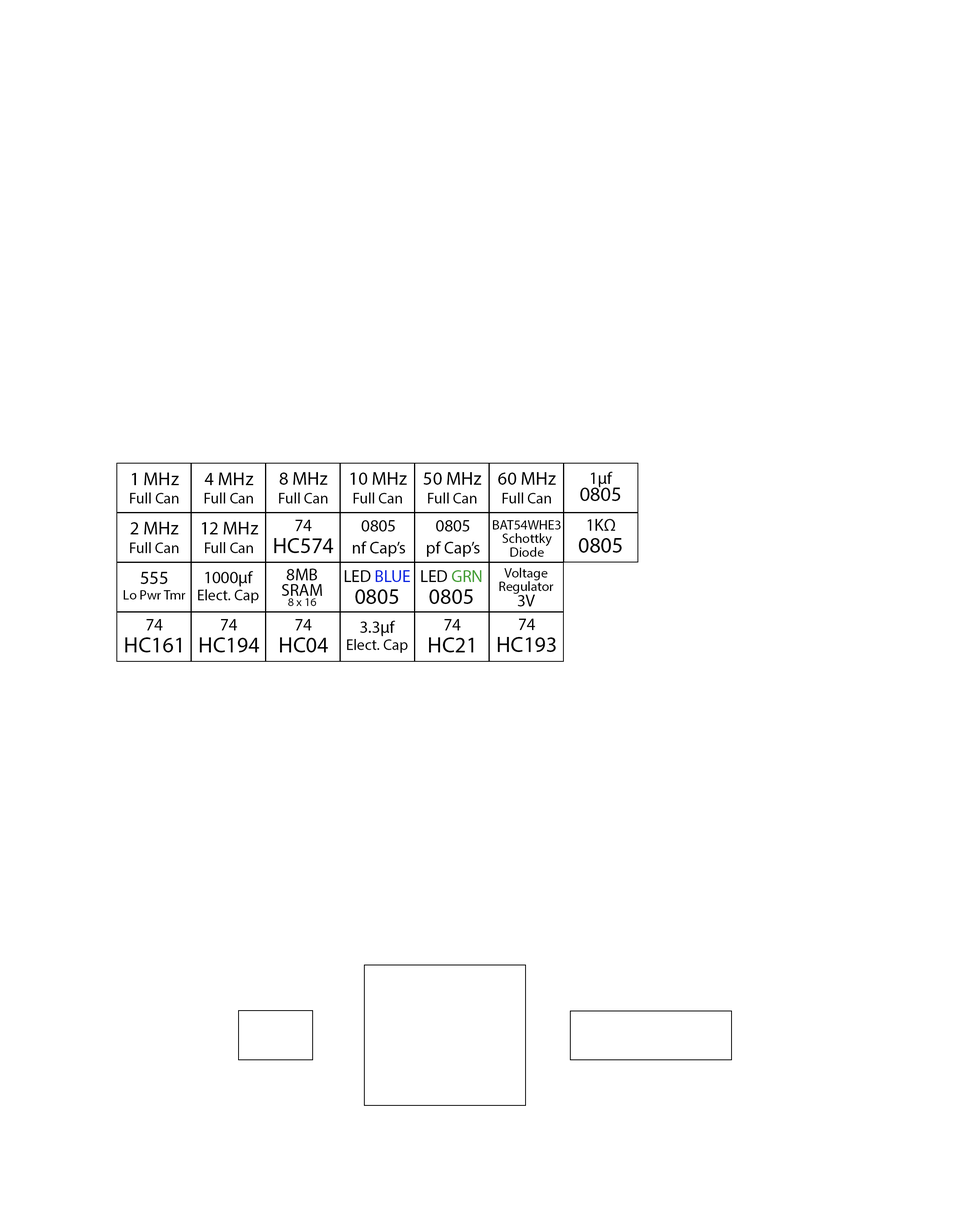
<style>
.page{position:relative;width:977px;height:1221px;background:#ffffff}
.page>*{position:absolute;margin:0}
.t1{font:15.3px/18.7px "MyriadPro-Regular";color:#000000}
.t2{font:18.7px/18.7px "MyriadPro-Regular";color:#000000}
.t3{font:20.3px/17px "MyriadPro-Regular";color:#000000}
.t4{font:17px/17px "MyriadPro-Regular";color:#000000}
.t5{font:22px/22px "MyriadPro-Regular";color:#000000}
.t6{font:17px/22px "MyriadPro-Regular";color:#000000}
.t7{font:13.6px/13.6px "MyriadPro-Regular";color:#000000}
.t8{font:11.9px/10.2px "MyriadPro-Regular";color:#010101}
.t9{font:17px/20.3px "MyriadPro-Regular";color:#010101}
.t10{font:17px/15.3px "MyriadPro-Regular";color:#010101}
.t11{font:17px/15.3px "MyriadPro-Regular";color:#000000}
.t12{font:13.6px/15.3px "MyriadPro-Regular";color:#000000}
.t13{font:18.7px/15.3px "MyriadPro-Regular";color:#000000}
.t14{font:15.3px/17px "MyriadPro-Regular";color:#000000}
.t15{font:17px/22px "MyriadPro-Regular";color:#0b25e1}
.t16{font:17px/22px "MyriadPro-Regular";color:#010101}
.t17{font:22px/22px "MyriadPro-Regular";color:#010101}
.t18{font:17px/22px "MyriadPro-Regular";color:#449f35}
</style>
<div class="page">
<p class="t1" style="left:130px;top:472px;width:49px;height:31px;text-align:center"><span class="t2">1 MHz<br></span>Full Can</p>
<p class="t1" style="left:204px;top:472px;width:49px;height:31px;text-align:center"><span class="t2">4 MHz<br></span>Full Can</p>
<p class="t1" style="left:279px;top:472px;width:49px;height:31px;text-align:center"><span class="t2">8 MHz<br></span>Full Can</p>
<p class="t1" style="left:350px;top:472px;width:57px;height:31px;text-align:center"><span class="t2">10 MHz<br></span>Full Can</p>
<p class="t1" style="left:423px;top:472px;width:58px;height:31px;text-align:center"><span class="t2">50 MHz<br></span>Full Can</p>
<p class="t1" style="left:498px;top:472px;width:57px;height:31px;text-align:center"><span class="t2">60 MHz<br></span>Full Can</p>
<p class="t3" style="left:580px;top:472px;width:40px;height:29px;text-align:center"><span class="t4">1µf<br></span>0805</p>
<p class="t1" style="left:130px;top:522px;width:49px;height:31px;text-align:center"><span class="t2">2 MHz<br></span>Full Can</p>
<p class="t1" style="left:202px;top:522px;width:56px;height:31px;text-align:center"><span class="t2">12 MHz<br></span>Full Can</p>
<p class="t5" style="left:274px;top:520px;width:59px;height:33px;text-align:center"><span class="t6">74<br></span>HC574</p>
<p class="t6" style="left:352px;top:520px;width:53px;height:37px;text-align:center">0805<br>nf Cap’s</p>
<p class="t6" style="left:426px;top:520px;width:53px;height:37px;text-align:center">0805<br>pf Cap’s</p>
<p class="t7" style="left:493px;top:520px;width:67px;height:37px;text-align:center">BAT54WHE3<br>Schottky<br>Diode</p>
<p class="t5" style="left:579px;top:519px;width:42px;height:34px;text-align:center"><span class="t6">1KΩ<br></span>0805</p>
<p class="t8" style="left:282px;top:569px;width:40px;height:37px;text-align:center"><span class="t9">8MB<br></span><span class="t10">SRAM<br></span>8 x 16</p>
<p class="t7" style="left:499px;top:568px;width:54px;height:38px;text-align:center">Voltage<br>Regulator<br><span class="t11">3V</span></p>
<p class="t12" style="left:124px;top:572px;width:61px;height:27px;text-align:center"><span class="t13">555<br></span>Lo Pwr Tmr</p>
<p class="t14" style="left:198px;top:571px;width:60px;height:32px;text-align:center"><span class="t4">1000µf<br></span>Elect. Cap</p>
<p class="t15" style="left:345px;top:570px;width:65px;height:34px;text-align:center"><span class="t16">LED </span>BLUE<br><span class="t17">0805</span></p>
<p class="t17" style="left:421px;top:570px;width:60px;height:34px;text-align:center"><span class="t16">LED </span><span class="t18">GRN<br></span>0805</p>
<p class="t5" style="left:125px;top:619px;width:56px;height:33px;text-align:center"><span class="t6">74<br></span>HC161</p>
<p class="t5" style="left:200px;top:619px;width:59px;height:33px;text-align:center"><span class="t6">74<br></span>HC194</p>
<p class="t5" style="left:280px;top:619px;width:48px;height:33px;text-align:center"><span class="t6">74<br></span>HC04</p>
<p class="t14" style="left:347px;top:621px;width:60px;height:32px;text-align:center"><span class="t4">3.3µf<br></span>Elect. Cap</p>
<p class="t5" style="left:429px;top:619px;width:44px;height:33px;text-align:center"><span class="t6">74<br></span>HC21</p>
<p class="t5" style="left:498px;top:619px;width:57px;height:33px;text-align:center"><span class="t6">74<br></span>HC193</p>
</div>
